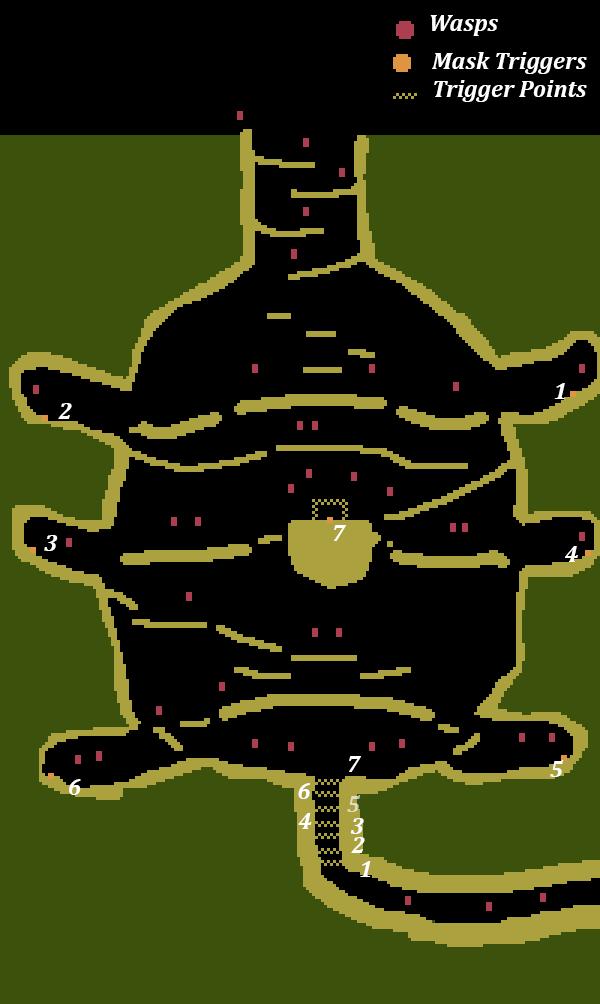
<style>
.page{position:relative;width:600px;height:1004px;background:#000000}
.page>*{position:absolute;margin:0}
.t1{font:24px "Cambria-BoldItalic";color:#ffffff}
.t2{font:24px "Cambria-BoldItalic";color:#e0dcc1}
</style>
<div class="page">
<p class="t1" style="left:430px;top:15px;width:68px;height:21px">Wasps</p>
<p class="t1" style="left:432px;top:52px;width:155px;height:22px">Mask Triggers</p>
<p class="t1" style="left:434px;top:80px;width:153px;height:22px">Trigger Points</p>
<p class="t1" style="left:554px;top:383px;width:11px;height:16px">1</p>
<p class="t1" style="left:58px;top:403px;width:14px;height:16px">2</p>
<p class="t1" style="left:334px;top:525px;width:12px;height:16px">7</p>
<p class="t1" style="left:44px;top:535px;width:14px;height:16px">3</p>
<p class="t1" style="left:565px;top:546px;width:13px;height:16px">4</p>
<p class="t1" style="left:349px;top:756px;width:12px;height:16px">7</p>
<p class="t1" style="left:550px;top:760px;width:14px;height:17px">5</p>
<p class="t1" style="left:69px;top:779px;width:12px;height:16px">6</p>
<p class="t1" style="left:298px;top:783px;width:12px;height:16px">6</p>
<p class="t2" style="left:347px;top:795px;width:14px;height:17px">5</p>
<p class="t1" style="left:298px;top:813px;width:14px;height:16px">4</p>
<p class="t1" style="left:350px;top:818px;width:14px;height:16px">3</p>
<p class="t1" style="left:351px;top:837px;width:14px;height:16px">2</p>
<p class="t1" style="left:360px;top:861px;width:11px;height:16px">1</p>
</div>
